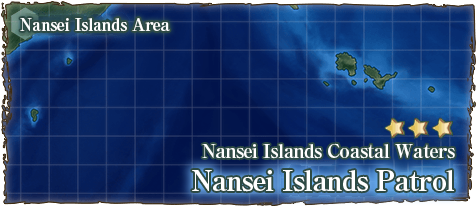
<style>
.page{position:relative;width:476px;height:206px}
.page>*{position:absolute;margin:0}
.t1{font:17px "RyuminPro-ExBold";letter-spacing:-0.04em;color:#ffffff}
.t2{font:19px "RyuminPro-ExBold";letter-spacing:-0.04em;color:#ffffff}
.t3{font:28px "RyuminPro-ExBold";letter-spacing:-0.04em;color:#ffffff}
</style>
<div class="page">
<p class="t1" style="left:20px;top:18px;width:150px;height:14px">Nansei Islands Area</p>
<p class="t2" style="left:202px;top:143px;width:253px;height:16px">Nansei Islands Coastal Waters</p>
<p class="t3" style="left:192px;top:170px;width:262px;height:22px">Nansei Islands Patrol</p>
</div>
